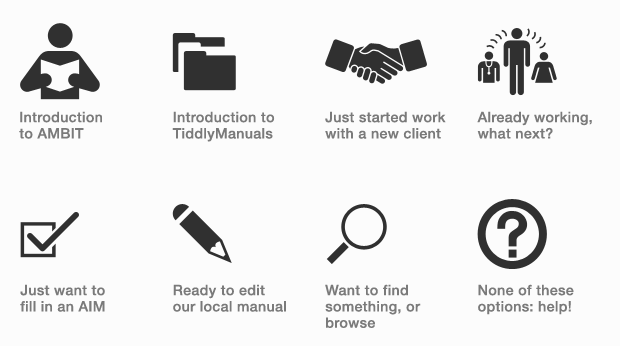
<style>
.page{position:relative;width:620px;height:346px;background:#fcfcfc}
.page>*{position:absolute;margin:0}
.t1{font:14.2px/16.3px "HelveticaNeue-Medium";letter-spacing:0.025em;color:#7a7a7a}
</style>
<div class="page">
<p class="t1" style="left:19px;top:111px;width:83px;height:28px">Introduction <br>to AMBIT</p>
<p class="t1" style="left:172px;top:111px;width:103px;height:31px">Introduction to <br>TiddlyManuals</p>
<p class="t1" style="left:325px;top:111px;width:121px;height:28px">Just started work <br>with a new client</p>
<p class="t1" style="left:477px;top:111px;width:115px;height:28px">Already working, <br>what next?</p>
<p class="t1" style="left:20px;top:284px;width:85px;height:28px">Just want to <br>fill in an AIM</p>
<p class="t1" style="left:173px;top:284px;width:113px;height:28px">Ready to edit <br>our local manual</p>
<p class="t1" style="left:325px;top:284px;width:96px;height:44px">Want to find <br>something, or <br>browse</p>
<p class="t1" style="left:478px;top:284px;width:96px;height:31px">None of these <br>options: help!</p>
</div>
